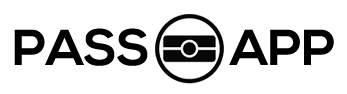
<style>
.page{position:relative;width:347px;height:94px;background:#ffffff}
.page>*{position:absolute;margin:0}
.t1{font:50px "NexaBold";color:#000000}
</style>
<div class="page">
<p class="t1" style="left:14px;top:28px;width:134px;height:38px">PASS</p>
<p class="t1" style="left:229px;top:29px;width:105px;height:36px">APP</p>
</div>
